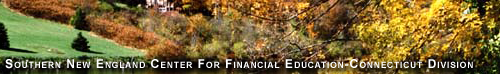
<style>
.page{position:relative;width:500px;height:74px}
.page>*{position:absolute;margin:0}
.t1{font:12px "Arial-BoldMT";letter-spacing:0.1em;color:#ffffff;font-variant:small-caps}
</style>
<div class="page">
<p class="t1" style="left:5px;top:59px;width:468px;height:10px">Southern New England Center For Financial Education-Connecticut Division</p>
</div>
